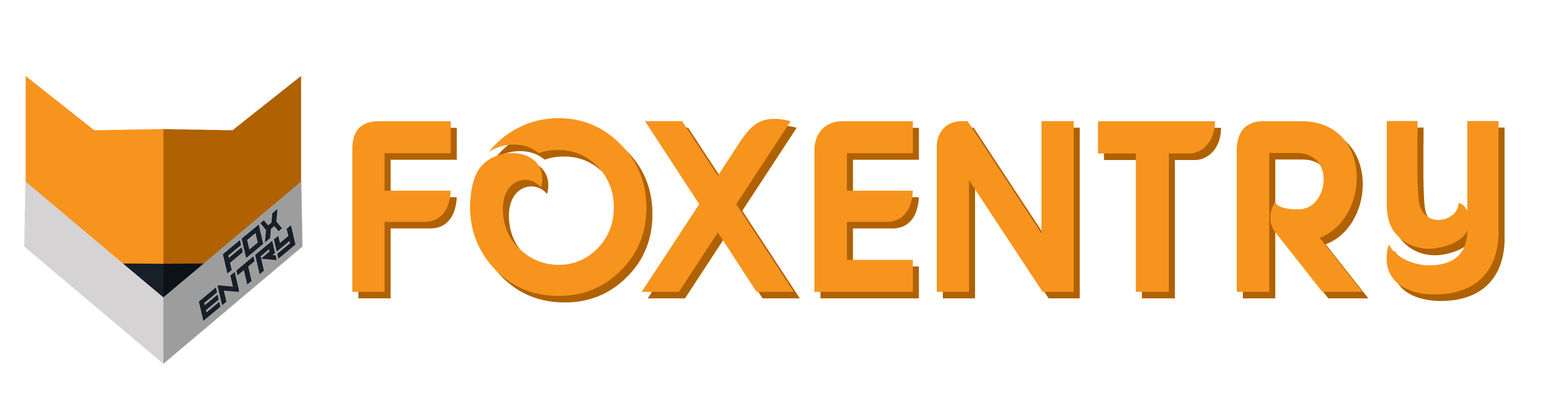
<style>
.page{position:relative;width:1568px;height:399px;background:#ffffff}
.page>*{position:absolute;margin:0}
.t1{font:243.9px "Fonarto";color:#f7941d;text-transform:uppercase}
</style>
<div class="page">
<p class="t1" style="left:352px;top:118px;width:1147px;height:178px">foxentry</p>
<p class="t1" style="left:358px;top:125px;width:1147px;height:178px">foxentry</p>
</div>
